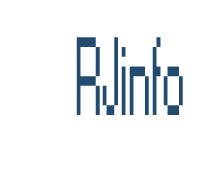
<style>
.page{position:relative;width:200px;height:170px;background:#ffffff}
.page>*{position:absolute;margin:0}
.t1{font:103.7px "Small Fonts";color:#234b6f;scale:0.47 1}
</style>
<div class="page">
<p class="t1" style="left:76px;top:37px;width:107px;height:78px">RJinfo</p>
</div>
